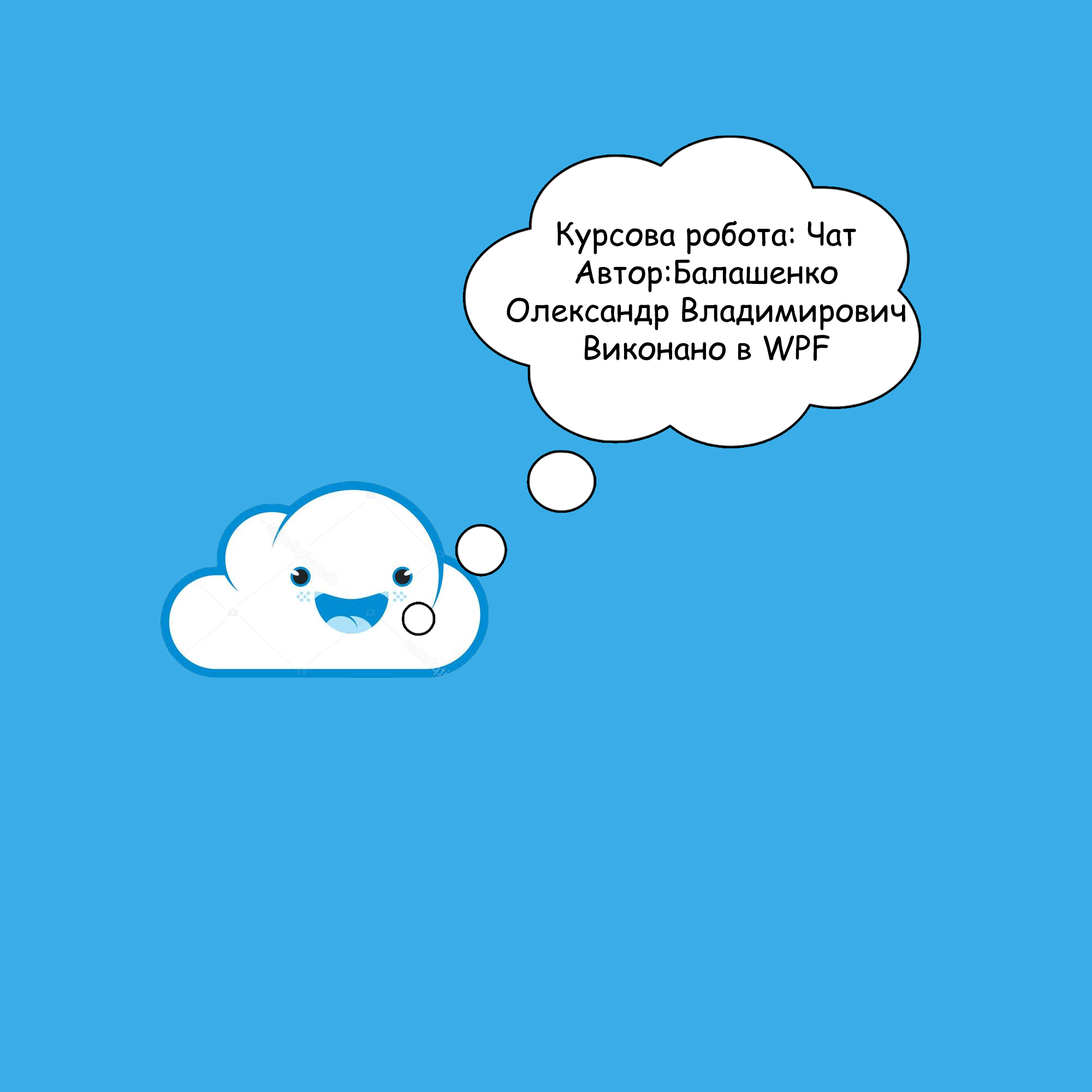
<style>
.page{position:relative;width:1092px;height:1092px;background:#3aade8}
.page>*{position:absolute;margin:0}
.t1{font:31.7px "ComicSansMS";color:#000000}
</style>
<div class="page">
<p class="t1" style="left:507px;top:221px;width:398px;height:140px;text-align:center">Курсова робота: Чат<br>Автор:Балашенко Олександр Владимирович<br>Виконано в WPF</p>
</div>
